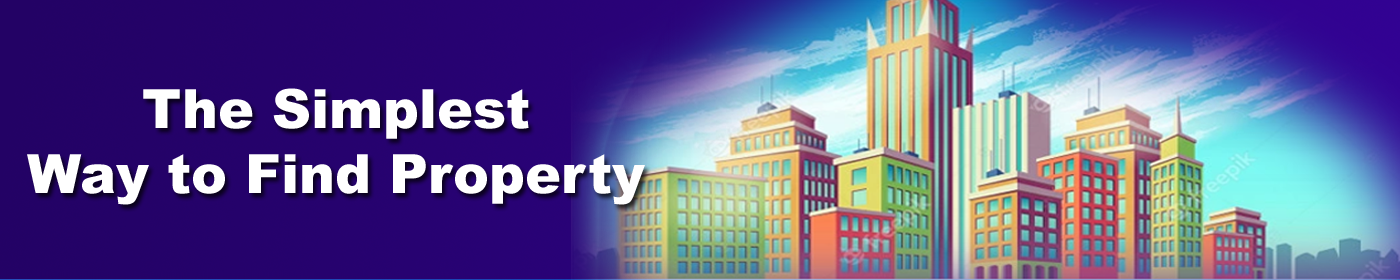
<style>
.page{position:relative;width:1400px;height:280px}
.page>*{position:absolute;margin:0}
.t1{font:54px "Arial-Black";color:#ffffff}
</style>
<div class="page">
<p class="t1" style="left:27px;top:88px;width:618px;height:117px;text-align:center">The Simplest<br>Way to Find Property</p>
</div>
